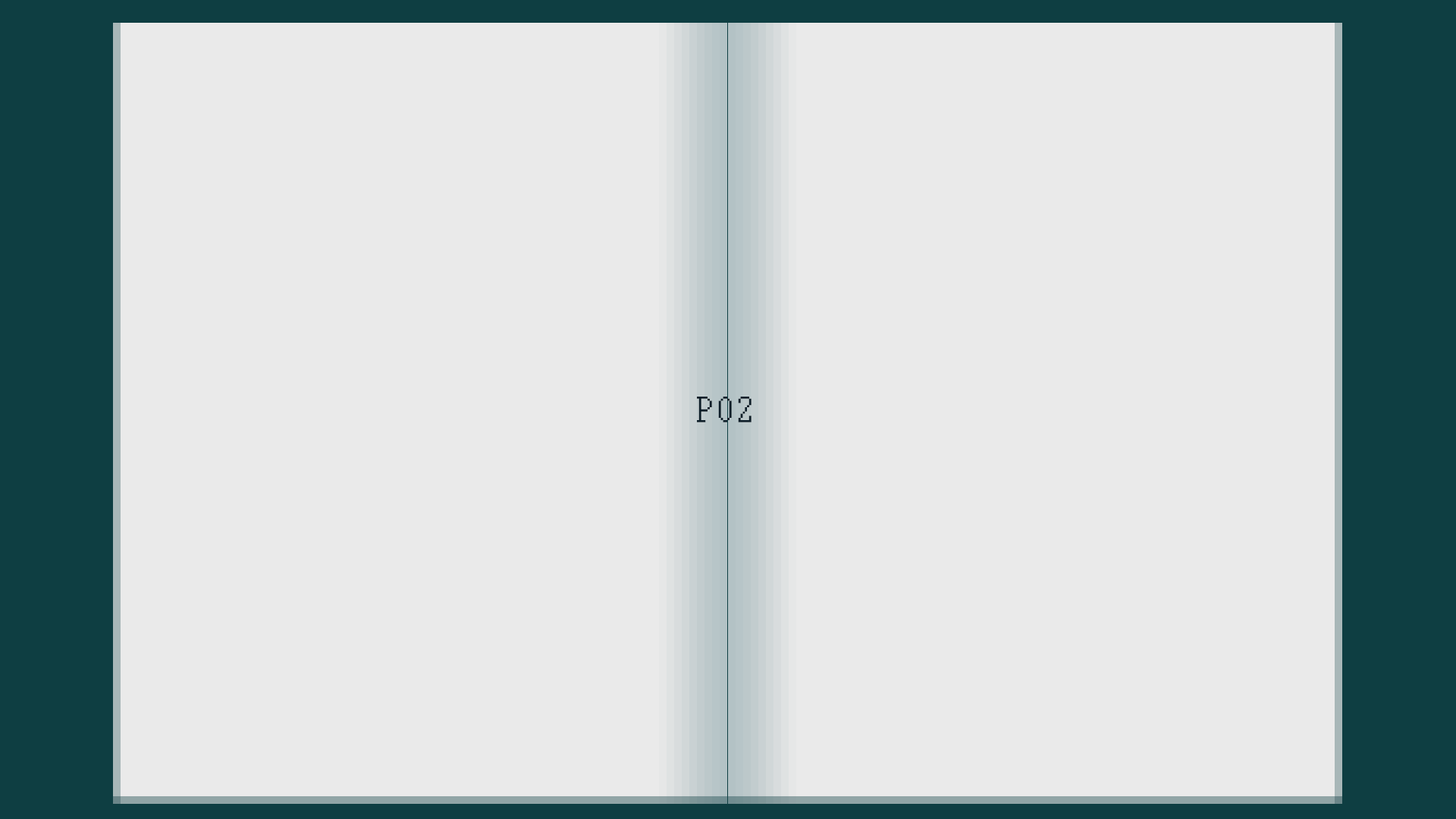
<style>
.page{position:relative;width:1456px;height:819px;background:#eaeaea}
.page>*{position:absolute;margin:0}
.t1{font:34.1px "KH-Dot-kagurazaka-16";letter-spacing:0.12em;color:#0a192d}
</style>
<div class="page">
<p class="t1" style="left:697px;top:397px;width:54px;height:25px">P02</p>
</div>
